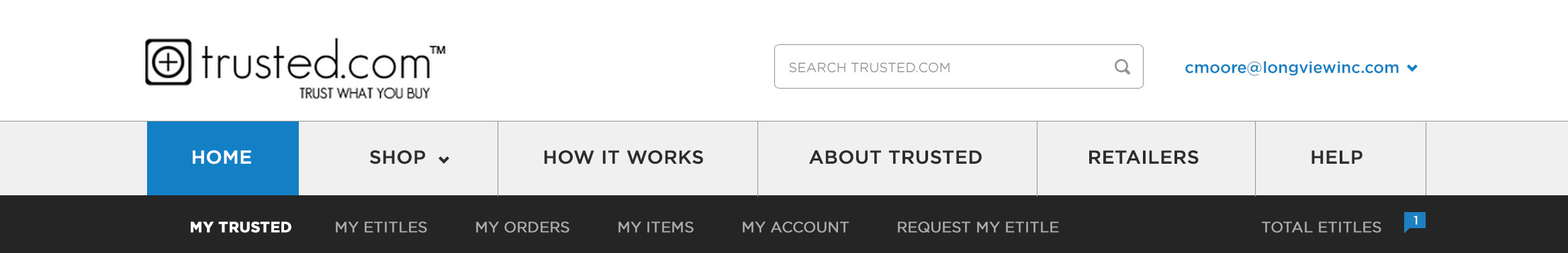
<style>
.page{position:relative;width:1568px;height:253px;background:#ffffff}
.page>*{position:absolute;margin:0}
.t1{font:18.8px "GothamHTF-Medium";color:#2d2d2d;text-transform:uppercase;font-weight:bold}
.t2{font:18.8px "GothamHTF-Medium";color:#ffffff;text-transform:uppercase;font-weight:bold}
.t3{font:14.8px "GothamHTF-Book";color:#ababab;text-transform:uppercase;font-weight:bold}
.t4{font:14.8px "GothamHTF-Bold";color:#ffffff;text-transform:uppercase;font-weight:bold}
.t5{font:12.1px "GothamHTF-Book";color:#ffffff;text-transform:uppercase;font-weight:bold}
</style>
<div class="page">
<p class="t1" style="left:193px;top:150px;width:1170px;height:15px"><span class="t2">Home </span>                  Shop                   How It Works                 About Trusted                 Retailers                  Help</p>
<p class="t3" style="left:191px;top:222px;width:1190px;height:11px"><span class="t4">My Trusted         </span>My eTitles          My Orders          MY ITEMS          My Account          REQUEST my etitle                                           total etitles</p>
<p class="t5" style="left:1414px;top:216px;width:4px;height:9px">1</p>
</div>
